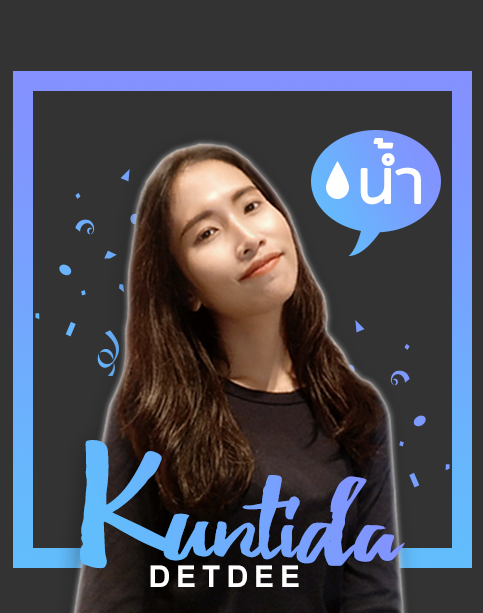
<style>
.page{position:relative;width:483px;height:613px;background:#333333}
.page>*{position:absolute;margin:0}
.t1{font:72px "RSU-Bold";color:#ffffff}
.t2{font:106.5px "Debby";color:#6cb0fd;scale:1.29 1}
.t3{font:177.5px "Debby";color:#6cb0fd;scale:1.29 1}
.t4{font:30px "Arial-BoldMT";letter-spacing:0.2em;color:#ffffff}
</style>
<div class="page">
<p class="t1" style="left:360px;top:138px;width:61px;height:67px">น้ำ</p>
<p class="t2" style="left:80px;top:440px;width:325px;height:129px"><span class="t3">K</span>untida</p>
<p class="t4" style="left:150px;top:565px;width:149px;height:22px">DETDEE</p>
</div>
